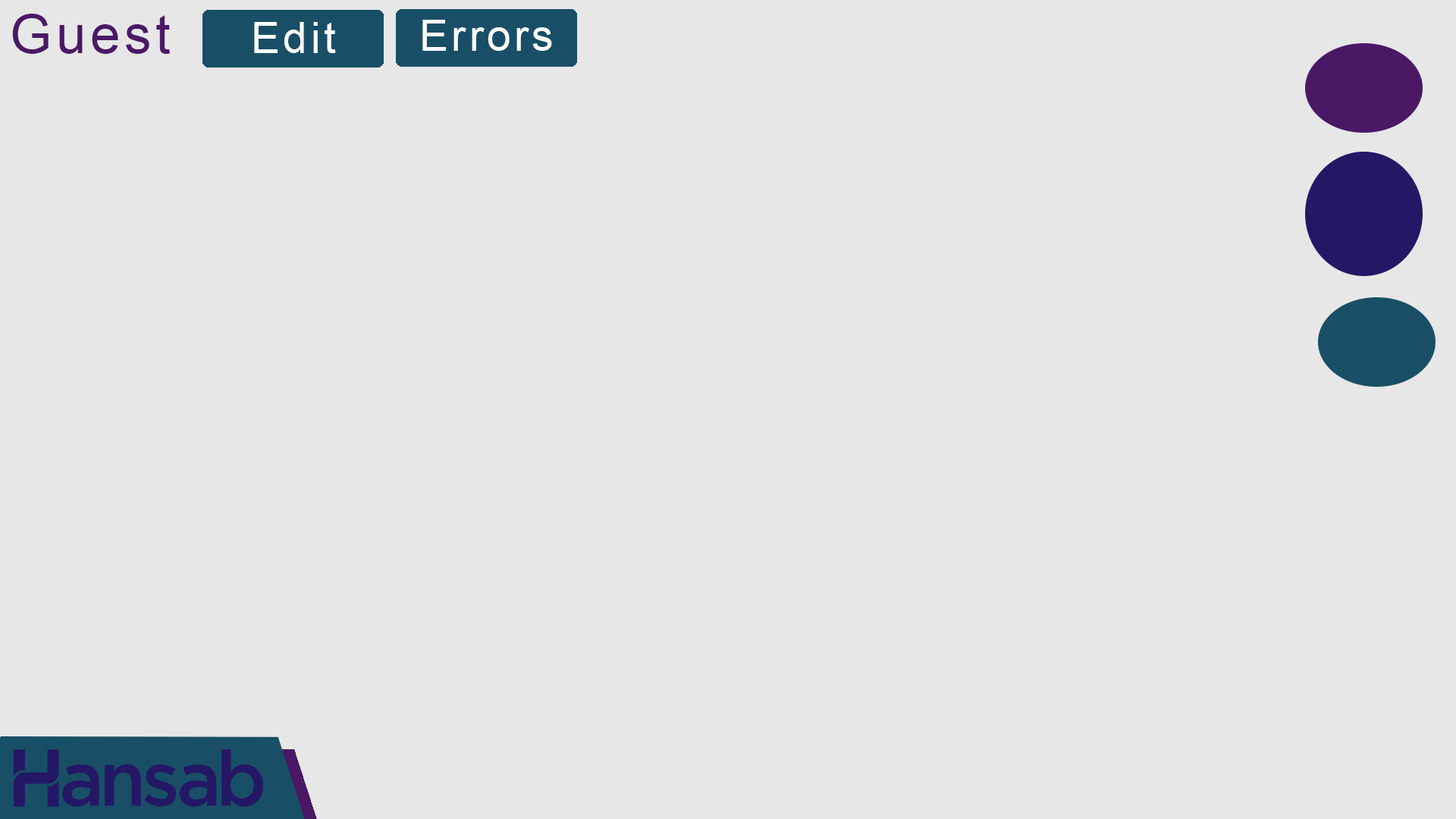
<style>
.page{position:relative;width:1456px;height:819px;background:#e7e7e7}
.page>*{position:absolute;margin:0}
.t1{font:53.7px "ArialMT";letter-spacing:0.08em;color:#4b1866}
.t2{font:43px "ArialMT";letter-spacing:0.08em;color:#fefefe}
</style>
<div class="page">
<p class="t1" style="left:12px;top:14px;width:159px;height:40px">Guest</p>
<p class="t2" style="left:254px;top:22px;width:82px;height:31px">Edit</p>
<p class="t2" style="left:422px;top:20px;width:130px;height:31px">Errors</p>
</div>
